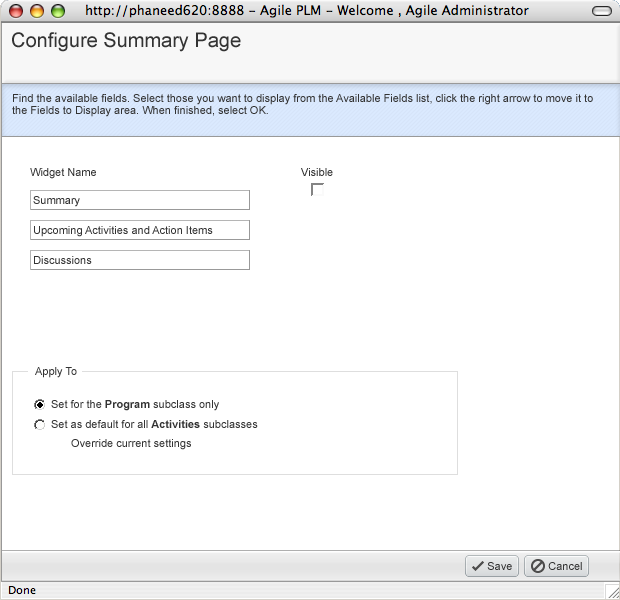
<style>
.page{position:relative;width:620px;height:600px;background:#ffffff}
.page>*{position:absolute;margin:0}
.t1{font:20px "ArialMT";color:#333333}
.t2{font:11px/12px "ArialMT";color:#333333}
.t3{font:11px "ArialMT";color:#333333}
.t4{font:11px "Arial-BoldMT";color:#333333}
</style>
<div class="page">
<p class="t1" style="left:12px;top:32px;width:229px;height:20px">Configure Summary Page</p>
<p class="t2" style="left:12px;top:94px;width:581px;height:23px">Find the available fields. Select those you want to display from the Available Fields list, click the right arrow to move it to <br>the Fields to Display area. When finished, select OK.</p>
<p class="t3" style="left:30px;top:168px;width:66px;height:11px">Widget Name</p>
<p class="t3" style="left:301px;top:168px;width:32px;height:8px">Visible</p>
<p class="t3" style="left:33px;top:196px;width:47px;height:11px">Summary</p>
<p class="t3" style="left:34px;top:226px;width:179px;height:11px">Upcoming Activities and Action Items</p>
<p class="t3" style="left:34px;top:256px;width:58px;height:8px">Discussions</p>
<p class="t3" style="left:35px;top:367px;width:42px;height:11px">Apply To</p>
<p class="t3" style="left:51px;top:400px;width:168px;height:11px">Set for the <span class="t4">Program</span> subclass only</p>
<p class="t3" style="left:51px;top:420px;width:207px;height:8px">Set as default for all <span class="t4">Activities</span> subclasses</p>
<p class="t3" style="left:71px;top:439px;width:120px;height:11px">Override current settings</p>
<p class="t3" style="left:487px;top:562px;width:25px;height:8px">Save</p>
<p class="t3" style="left:548px;top:562px;width:34px;height:8px">Cancel</p>
</div>
